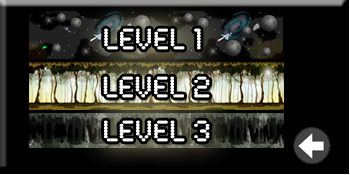
<style>
.page{position:relative;width:350px;height:175px;background:#000000}
.page>*{position:absolute;margin:0}
.t1{font:30px "SynchroLET";color:#ffffff}
</style>
<div class="page">
<p class="t1" style="left:104px;top:28px;width:97px;height:22px">LEVEL 1</p>
<p class="t1" style="left:103px;top:76px;width:107px;height:22px">LEVEL 2</p>
<p class="t1" style="left:104px;top:120px;width:106px;height:22px">LEVEL 3</p>
</div>
